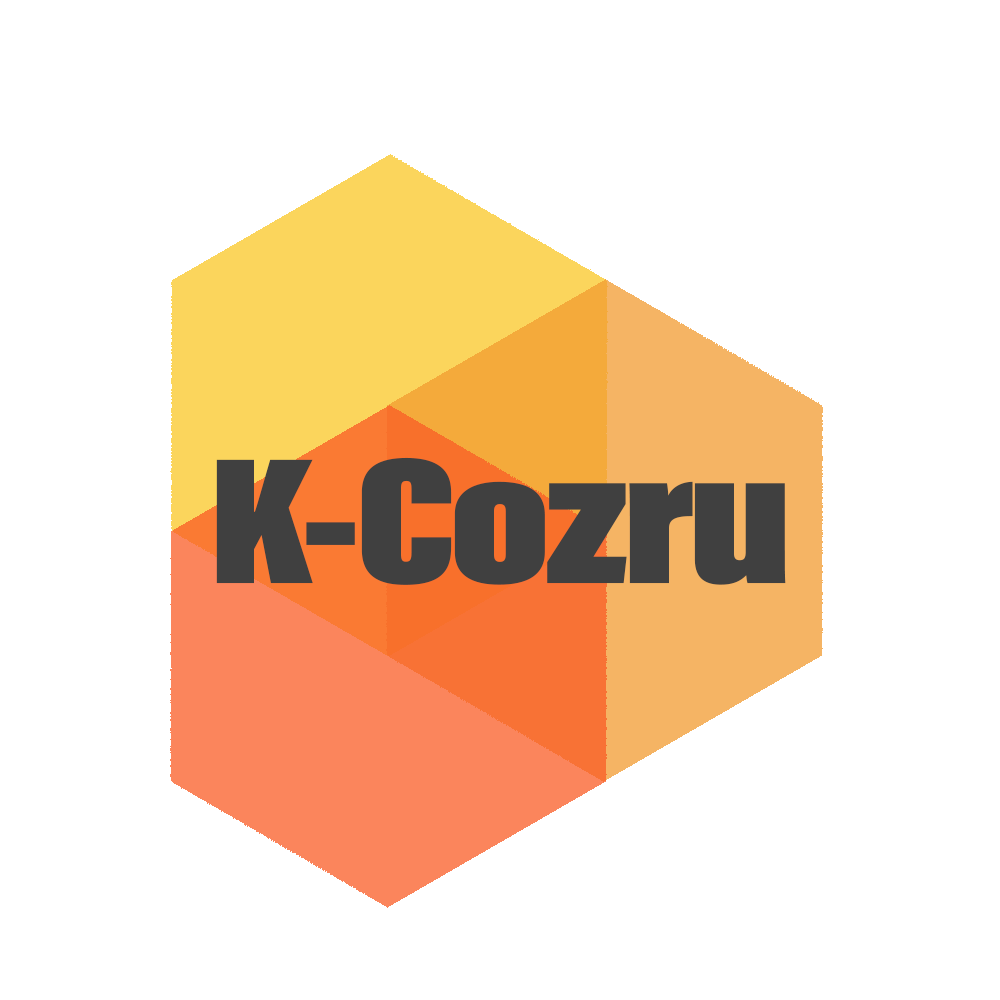
<style>
.page{position:relative;width:1000px;height:1000px;background:#ffffff}
.page>*{position:absolute;margin:0}
.t1{font:184.9px "AcuminConcept-ExtraCondensedUltraBlack";letter-spacing:-0.03em;color:#404040;scale:1.33 1}
</style>
<div class="page">
<p class="t1" style="left:216px;top:457px;width:570px;height:128px">K-Cozru</p>
</div>
